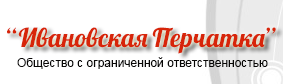
<style>
.page{position:relative;width:283px;height:84px;background:#ffffff}
.page>*{position:absolute;margin:0}
.t1{font:26px "Lobster";color:#d72509}
.t2{font:12px "ArialMT";color:#080706}
</style>
<div class="page">
<p class="t1" style="left:7px;top:27px;width:269px;height:27px">“Ивановская Перчатка”</p>
<p class="t2" style="left:17px;top:57px;width:251px;height:12px">Общество с ограниченной ответственностью</p>
</div>
